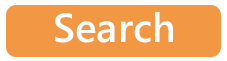
<style>
.page{position:relative;width:227px;height:61px;background:#f29844}
.page>*{position:absolute;margin:0}
.t1{font:40.5px "YuGothicUI-Semibold";color:#ffffff}
</style>
<div class="page">
<p class="t1" style="left:55px;top:12px;width:118px;height:31px">Search</p>
</div>
